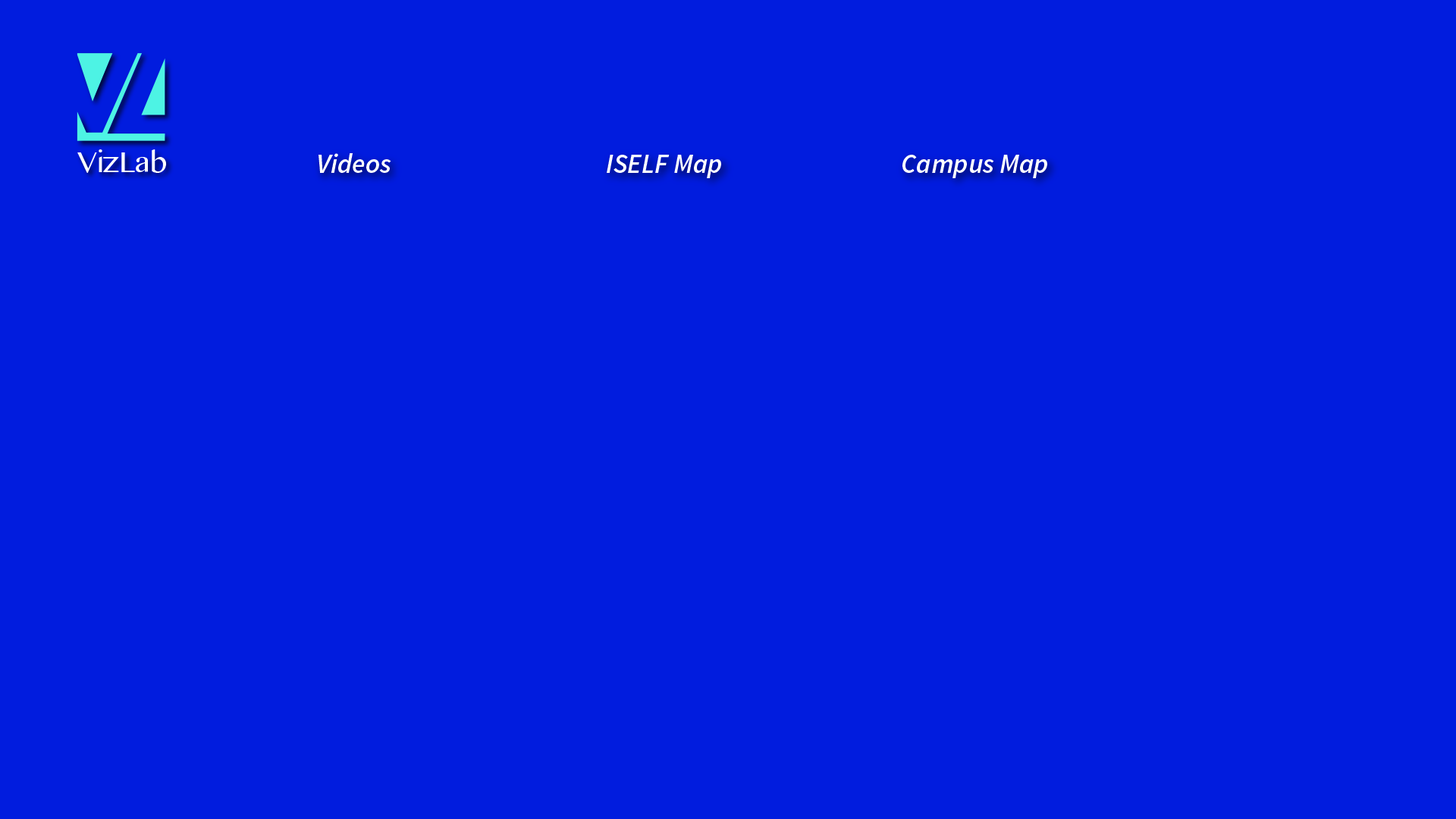
<style>
.page{position:relative;width:1456px;height:819px;background:#011cde}
.page>*{position:absolute;margin:0}
.t1{font:28.8px "MalayalamMN";color:#ffffff}
.t2{font:27.3px "SourceSansPro-SemiboldIt";color:#ffffff}
</style>
<div class="page">
<p class="t1" style="left:77px;top:149px;width:90px;height:24px">VizLab</p>
<p class="t2" style="left:318px;top:153px;width:73px;height:20px">Videos</p>
<p class="t2" style="left:607px;top:155px;width:114px;height:23px">ISELF Map</p>
<p class="t2" style="left:902px;top:155px;width:145px;height:23px">Campus Map</p>
</div>
